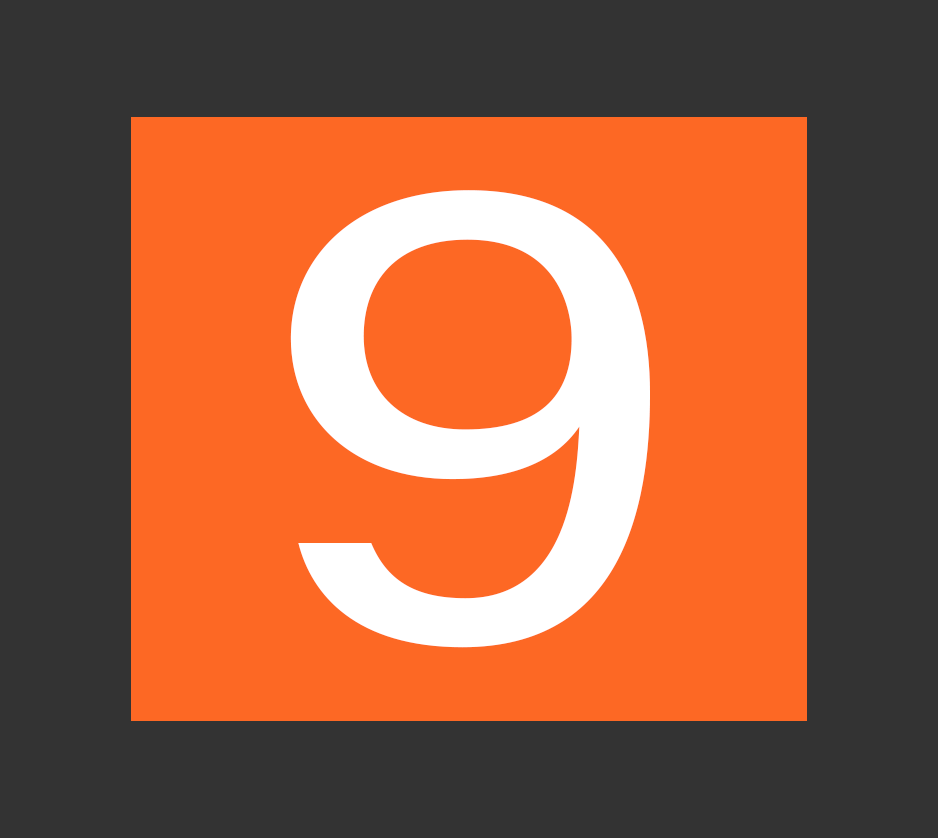
<style>
.page{position:relative;width:938px;height:838px;background:#333333}
.page>*{position:absolute;margin:0}
.t1{font:671.6px "AcuminConcept-Regular";color:#ffffff;font-weight:bold;scale:1.2 1}
</style>
<div class="page">
<p class="t1" style="left:290px;top:190px;width:360px;height:458px">9</p>
</div>
